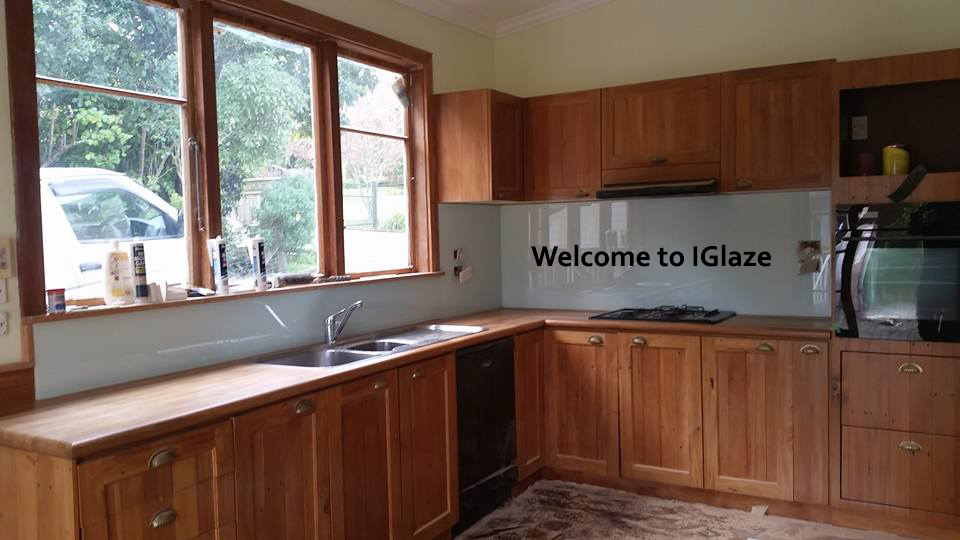
<style>
.page{position:relative;width:960px;height:540px}
.page>*{position:absolute;margin:0}
.t1{font:30px "Corbel-Bold";color:#000000}
</style>
<div class="page">
<p class="t1" style="left:531px;top:244px;width:240px;height:23px">Welcome to IGlaze</p>
</div>
